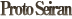
<style>
.page{position:relative;width:72px;height:19px;background:#ffffff}
.page>*{position:absolute;margin:0}
.t1{font:18px "RyuminPro-ExBold";letter-spacing:-0.15em;color:#4a3f32;font-weight:bold;scale:0.85 1}
</style>
<div class="page">
<p class="t1" style="left:0px;top:1px;width:73px;height:15px">Proto Seiran</p>
</div>
